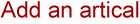
<style>
.page{position:relative;width:140px;height:24px;background:#ffffff}
.page>*{position:absolute;margin:0}
.t1{font:22.7px "ArialMT";color:#a10000}
</style>
<div class="page">
<p class="t1" style="left:0px;top:1px;width:139px;height:17px">Add an artical</p>
</div>
